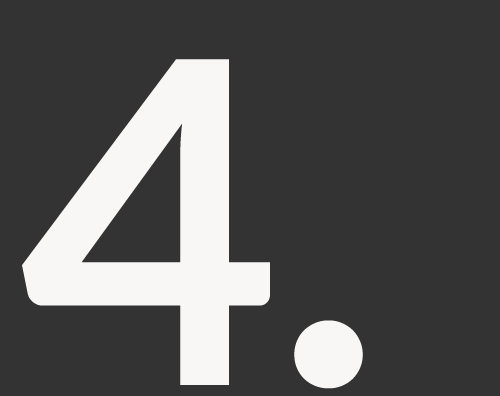
<style>
.page{position:relative;width:500px;height:396px;background:#333333}
.page>*{position:absolute;margin:0}
.t1{font:450px "Lato-Bold";color:#f9f6f6;text-transform:uppercase}
</style>
<div class="page">
<p class="t1" style="left:22px;top:59px;width:341px;height:330px">4.</p>
</div>
